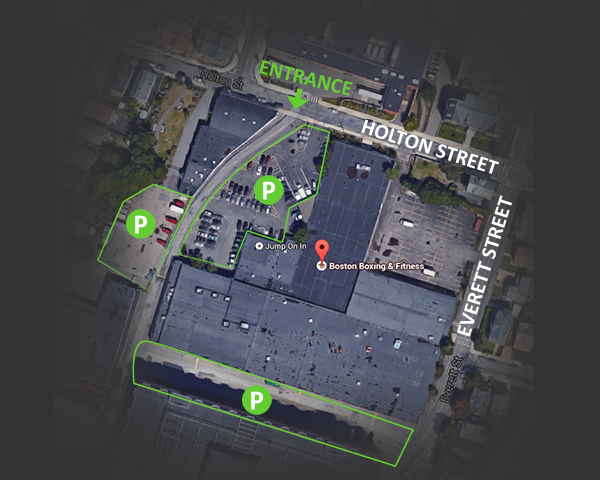
<style>
.page{position:relative;width:600px;height:480px;background:#333333}
.page>*{position:absolute;margin:0}
.t1{font:21.4px "Calibri-Bold";color:#66cc33}
.t2{font:21.3px "Calibri-Bold";color:#ffffff}
.t3{font:27.9px "Calibri-Bold";color:#ffffff}
</style>
<div class="page">
<p class="t1" style="left:259px;top:60px;width:94px;height:36px;rotate:14deg">ENTRANCE</p>
<p class="t2" style="left:361px;top:119px;width:138px;height:55px;rotate:18deg">HOLTON STREET</p>
<p class="t3" style="left:263px;top:181px;width:12px;height:19px">P</p>
<p class="t2" style="left:457px;top:195px;width:55px;height:142px;rotate:-72deg">EVERETT STREET</p>
<p class="t3" style="left:135px;top:215px;width:12px;height:19px">P</p>
<p class="t3" style="left:251px;top:391px;width:12px;height:19px">P</p>
</div>
